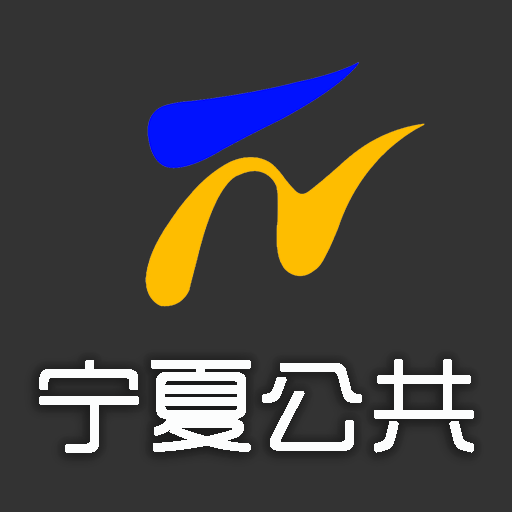
<style>
.page{position:relative;width:512px;height:512px;background:#333333}
.page>*{position:absolute;margin:0}
.t1{font:106.7px "SJshishang-Regular";letter-spacing:0.02em;color:#fcfdfd;font-weight:bold}
</style>
<div class="page">
<p class="t1" style="left:39px;top:359px;width:435px;height:94px">宁夏公共</p>
</div>
